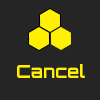
<style>
.page{position:relative;width:100px;height:100px;background:#262525}
.page>*{position:absolute;margin:0}
.t1{font:18px "Orbitron-Bold";color:#fff004}
</style>
<div class="page">
<p class="t1" style="left:17px;top:64px;width:68px;height:14px">Cancel</p>
</div>
